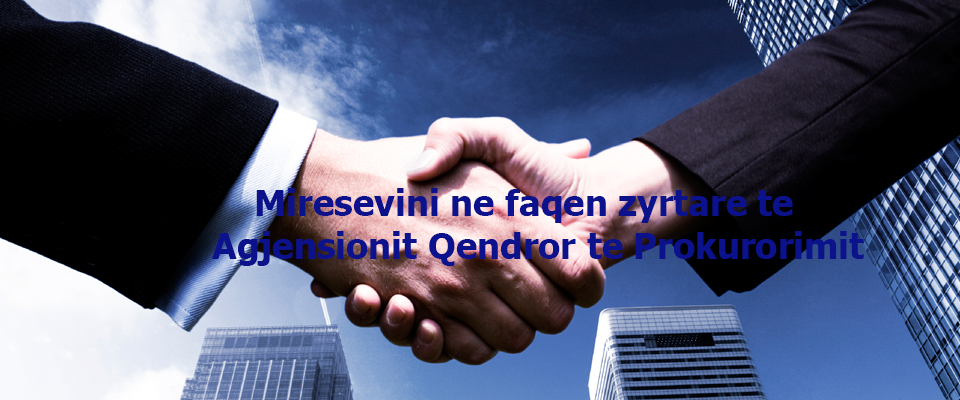
<style>
.page{position:relative;width:960px;height:400px}
.page>*{position:absolute;margin:0}
.t1{font:36px "Tahoma-Bold";color:#0c128c}
.t2{font:36px "Tahoma-Bold";color:#010101}
</style>
<div class="page">
<p class="t1" style="left:212px;top:188px;width:652px;height:78px"><span class="t2"><br><br><br><br></span>    Miresevini ne faqen zyrtare te Agjensionit Qendror te Prokurorimit</p>
</div>
